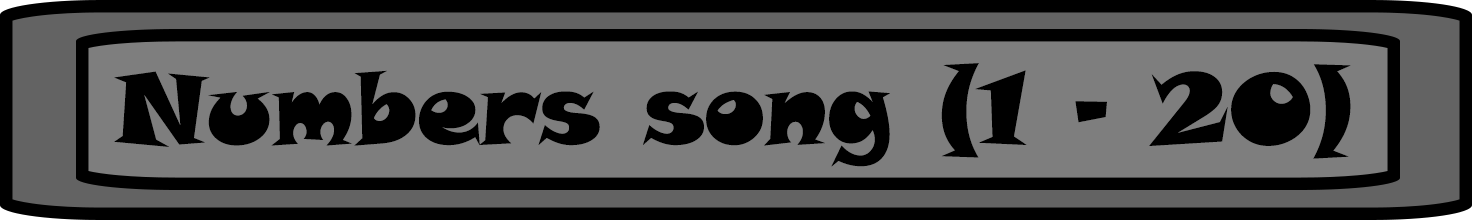
<style>
.page{position:relative;width:1472px;height:220px;background:#7e7e7e}
.page>*{position:absolute;margin:0}
.t1{font:100px "SnapITC-Regular";color:#000000}
</style>
<div class="page">
<p class="t1" style="left:114px;top:63px;width:1237px;height:104px">Numbers song (1 - 20)</p>
</div>
